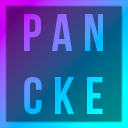
<style>
.page{position:relative;width:128px;height:128px}
.page>*{position:absolute;margin:0}
.t1{font:52px "BebasNeue";letter-spacing:0.2em}
</style>
<div class="page">
<p class="t1" style="left:24px;top:14px;width:79px;height:100px;text-align:center">PAN<br>CKE</p>
</div>
